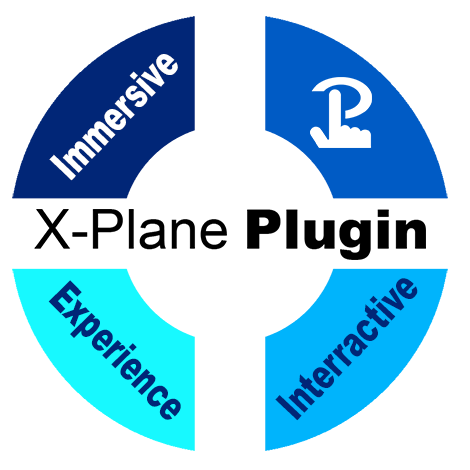
<style>
.page{position:relative;width:470px;height:470px;background:#ffffff}
.page>*{position:absolute;margin:0}
.t1{font:42.3px "Arial-Black";color:#ffffff;scale:0.67 1}
.t2{font:42.3px "Arial-Black";color:#012677;scale:0.67 1}
</style>
<div class="page">
<p class="t1" style="left:49px;top:54px;width:129px;height:127px;rotate:-46deg">Immersive</p>
<p class="t2" style="left:48px;top:280px;width:133px;height:140px;rotate:45deg">Experience</p>
<p class="t2" style="left:275px;top:278px;width:143px;height:143px;rotate:-47deg">Interractive</p>
</div>
